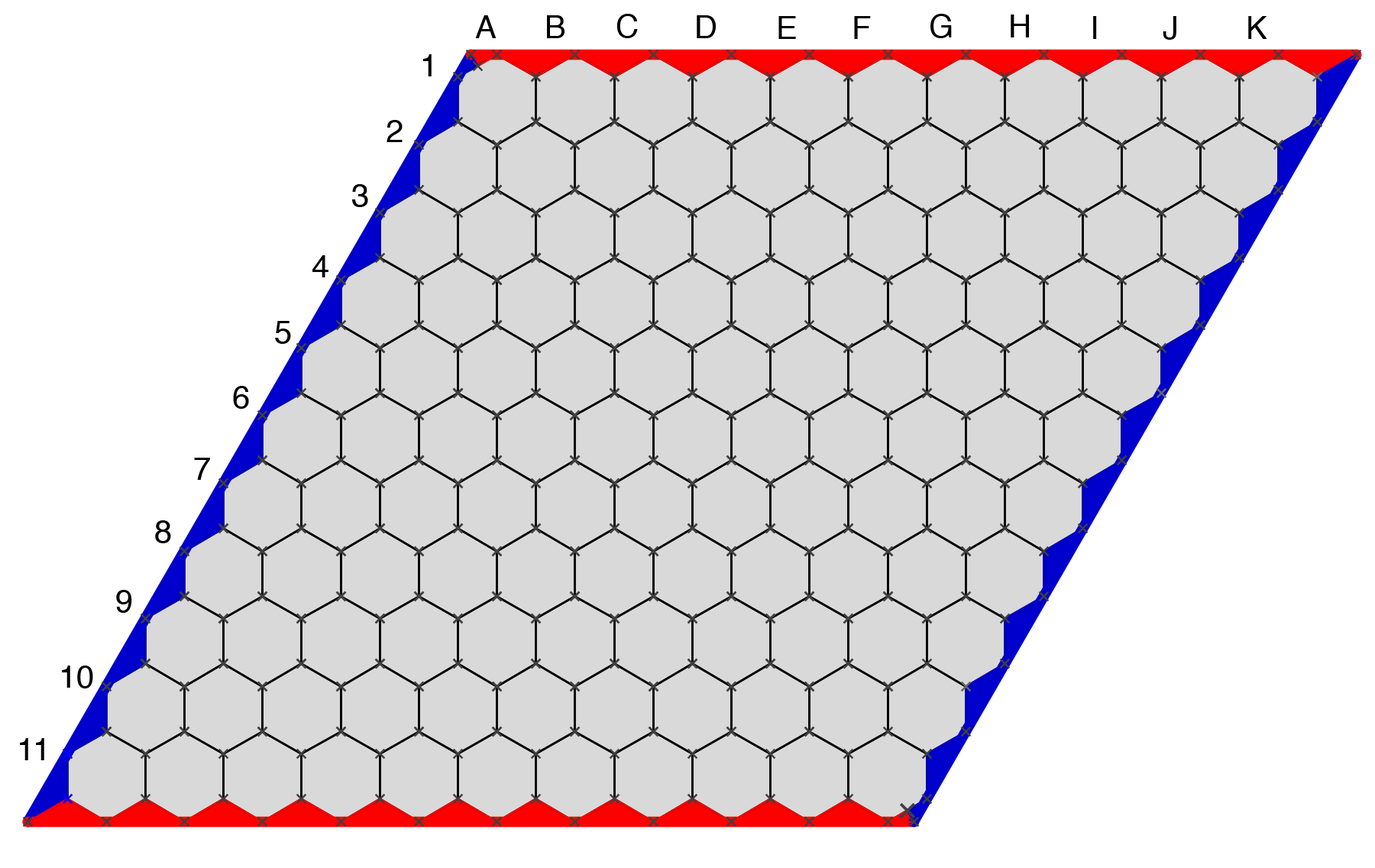
<style>
.page{position:relative;width:1375px;height:868px;background:#d9d9d9}
.page>*{position:absolute;margin:0}
.t1{font:31.8px "Helvetica";color:#000000}
</style>
<div class="page">
<p class="t1" style="left:475px;top:15px;width:21px;height:23px">A</p>
<p class="t1" style="left:547px;top:15px;width:17px;height:23px">B</p>
<p class="t1" style="left:616px;top:14px;width:22px;height:24px">C</p>
<p class="t1" style="left:696px;top:15px;width:20px;height:23px">D</p>
<p class="t1" style="left:778px;top:16px;width:18px;height:23px">E</p>
<p class="t1" style="left:854px;top:16px;width:17px;height:23px">F</p>
<p class="t1" style="left:930px;top:14px;width:22px;height:24px">G</p>
<p class="t1" style="left:1010px;top:15px;width:19px;height:22px">H</p>
<p class="t1" style="left:1093px;top:16px;width:4px;height:23px">I</p>
<p class="t1" style="left:1162px;top:16px;width:14px;height:24px">J</p>
<p class="t1" style="left:1248px;top:16px;width:19px;height:23px">K</p>
<p class="t1" style="left:423px;top:54px;width:8px;height:22px">1</p>
<p class="t1" style="left:386px;top:120px;width:16px;height:22px">2</p>
<p class="t1" style="left:352px;top:184px;width:16px;height:23px">3</p>
<p class="t1" style="left:312px;top:255px;width:16px;height:22px">4</p>
<p class="t1" style="left:275px;top:321px;width:16px;height:23px">5</p>
<p class="t1" style="left:233px;top:386px;width:16px;height:23px">6</p>
<p class="t1" style="left:194px;top:457px;width:16px;height:23px">7</p>
<p class="t1" style="left:155px;top:520px;width:16px;height:23px">8</p>
<p class="t1" style="left:116px;top:590px;width:16px;height:22px">9</p>
<p class="t1" style="left:62px;top:665px;width:31px;height:23px">10</p>
<p class="t1" style="left:20px;top:738px;width:24px;height:22px">11</p>
</div>
